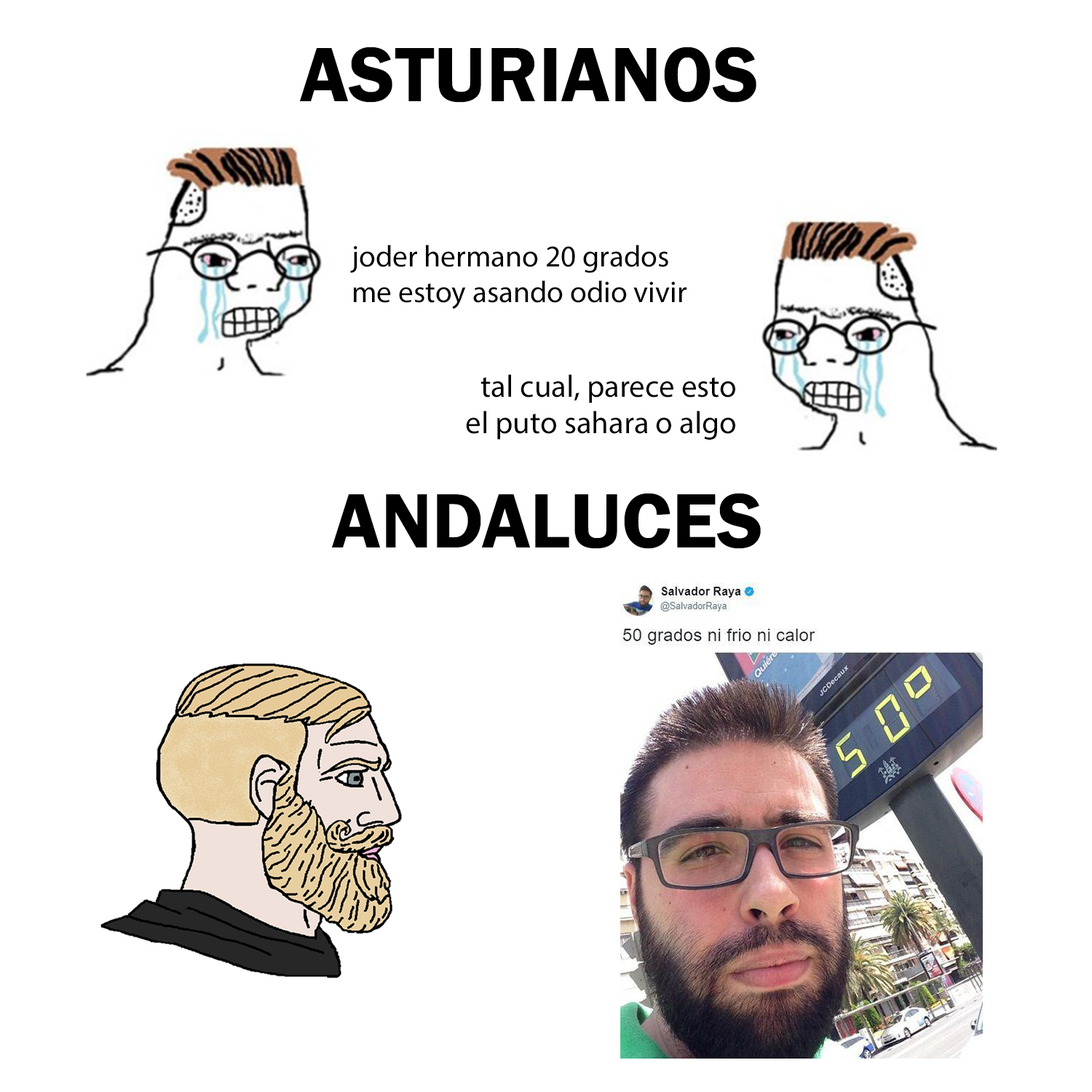
<style>
.page{position:relative;width:1092px;height:1092px;background:#ffffff}
.page>*{position:absolute;margin:0}
.t1{font:79.7px "FranklinGothic-Demi";color:#000000}
.t2{font:30.2px "MyriadPro-Regular";color:#000000}
.t3{font:31.3px "MyriadPro-Regular";color:#000000}
</style>
<div class="page">
<p class="t1" style="left:300px;top:47px;width:456px;height:56px">ASTURIANOS</p>
<p class="t2" style="left:350px;top:245px;width:336px;height:64px">joder hermano 20 grados<br>me estoy asando odio vivir</p>
<p class="t3" style="left:466px;top:374px;width:269px;height:66px;text-align:right">tal cual, parece esto<br>el puto sahara o algo</p>
<p class="t1" style="left:332px;top:493px;width:429px;height:56px">ANDALUCES</p>
</div>
